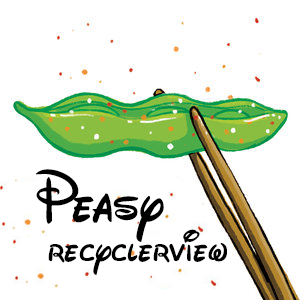
<style>
.page{position:relative;width:300px;height:300px;background:#ffffff}
.page>*{position:absolute;margin:0}
.t1{font:72px "Waltograph";color:#000000}
.t2{font:48px "Waltograph";color:#000000}
</style>
<div class="page">
<p class="t1" style="left:36px;top:169px;width:128px;height:73px">Peasy</p>
<p class="t2" style="left:48px;top:229px;width:179px;height:46px">recyclerview</p>
</div>
